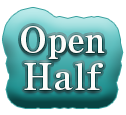
<style>
.page{position:relative;width:126px;height:115px;background:#ffffff}
.page>*{position:absolute;margin:0}
.t1{font:36px/37px "RyuminPro-ExBold";color:#fbfbf9}
</style>
<div class="page">
<p class="t1" style="left:21px;top:26px;width:84px;height:64px;text-align:center">Open<br>Half</p>
</div>
